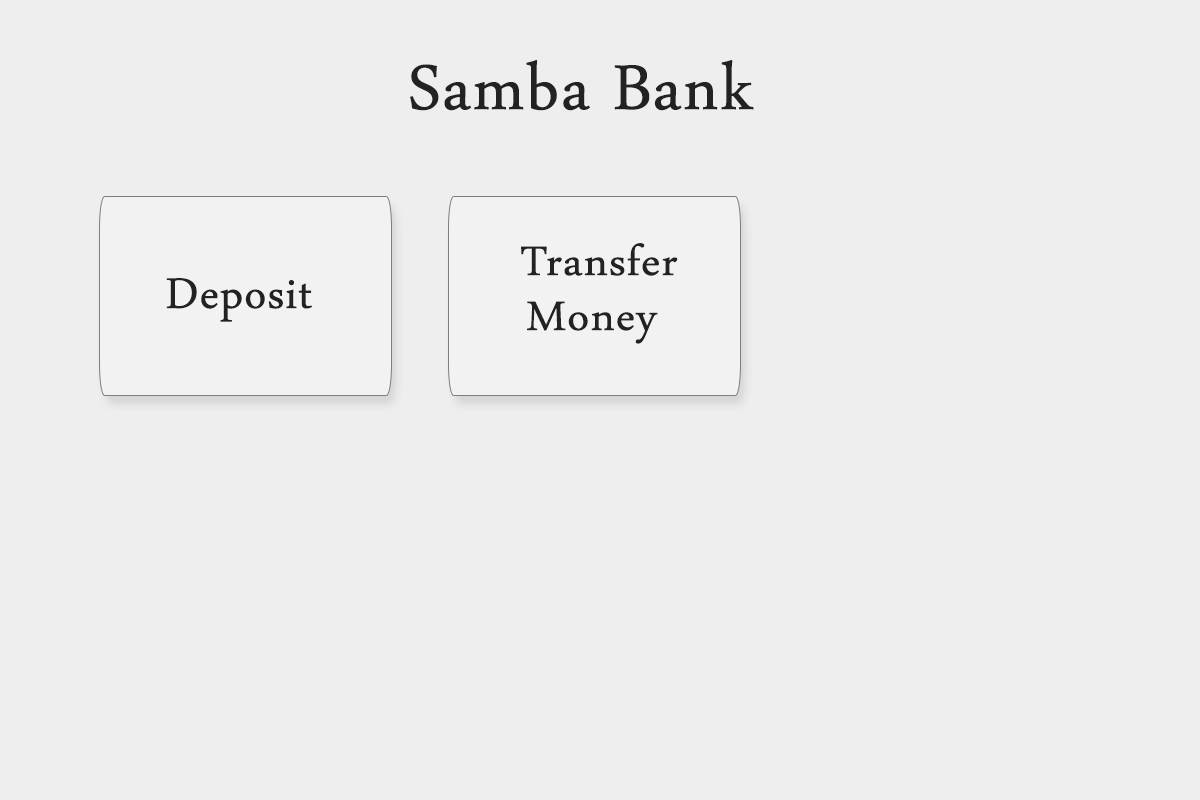
<style>
.page{position:relative;width:1200px;height:800px;background:#eeeeee}
.page>*{position:absolute;margin:0}
.t1{font:91.7px "ArabicTypesetting";color:#222222;font-weight:bold}
.t2{font:60px/52.1px "ArabicTypesetting";color:#222222;font-weight:bold;scale:1.04 1}
.t3{font:62.5px "ArabicTypesetting";color:#222222;font-weight:bold}
</style>
<div class="page">
<p class="t1" style="left:410px;top:59px;width:344px;height:52px">Samba Bank</p>
<p class="t2" style="left:521px;top:243px;width:157px;height:101px;text-align:center">Transfer <br>Money</p>
<p class="t3" style="left:166px;top:278px;width:146px;height:44px">Deposit</p>
</div>
